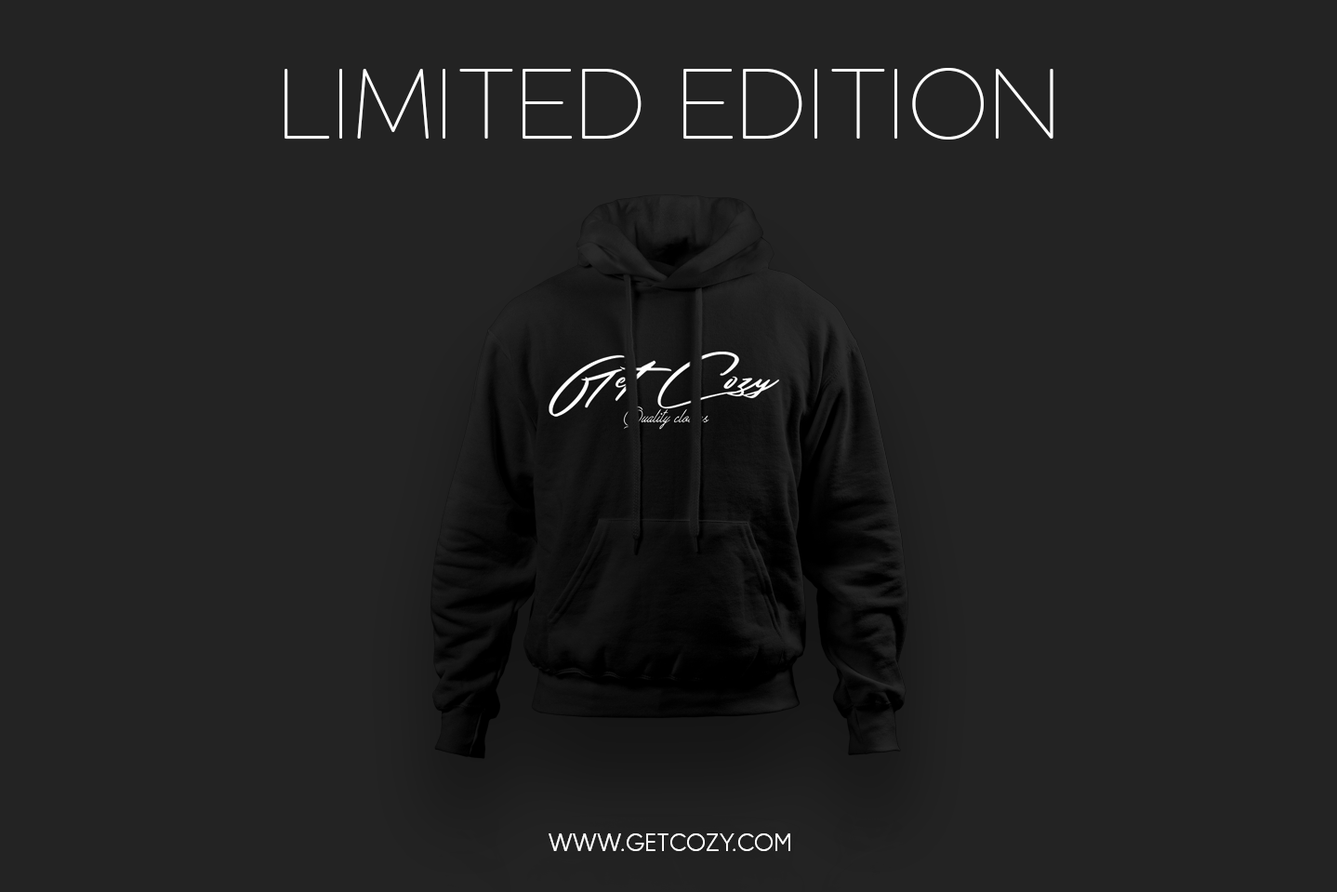
<style>
.page{position:relative;width:1337px;height:892px;background:#232323}
.page>*{position:absolute;margin:0}
.t1{font:93.7px "CocogoosePro-Thin";color:#ffffff}
.t2{font:24.3px "MADEOkineSansPERSONALUSE-Light";color:#ffffff}
</style>
<div class="page">
<p class="t1" style="left:285px;top:68px;width:769px;height:71px">LIMITED EDITION</p>
<p class="t2" style="left:549px;top:833px;width:241px;height:18px">WWW.GETCOZY.COM</p>
</div>
